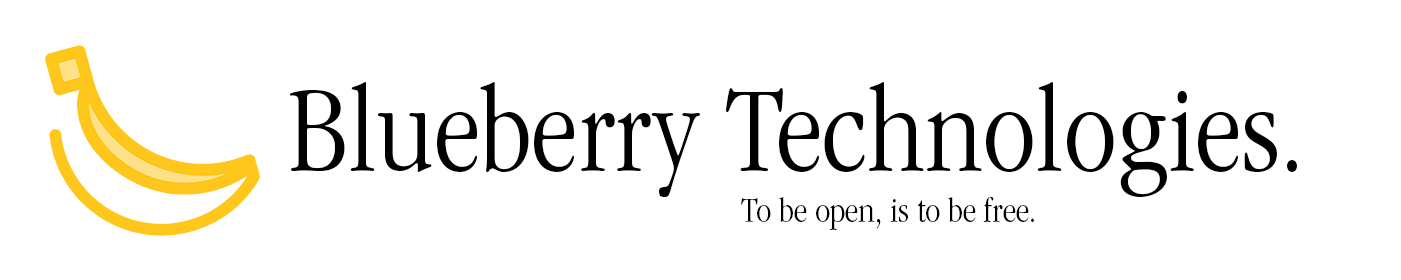
<style>
.page{position:relative;width:1401px;height:280px;background:#ffffff}
.page>*{position:absolute;margin:0}
.t1{font:125px "ITCGaramondStd-LtNarrow";color:#000000}
.t2{font:36.1px "ITCGaramondStd-LtNarrow";color:#000000}
</style>
<div class="page">
<p class="t1" style="left:289px;top:82px;width:1008px;height:116px">Blueberry Technologies.</p>
<p class="t2" style="left:741px;top:197px;width:293px;height:33px">To be open, is to be free.</p>
</div>
